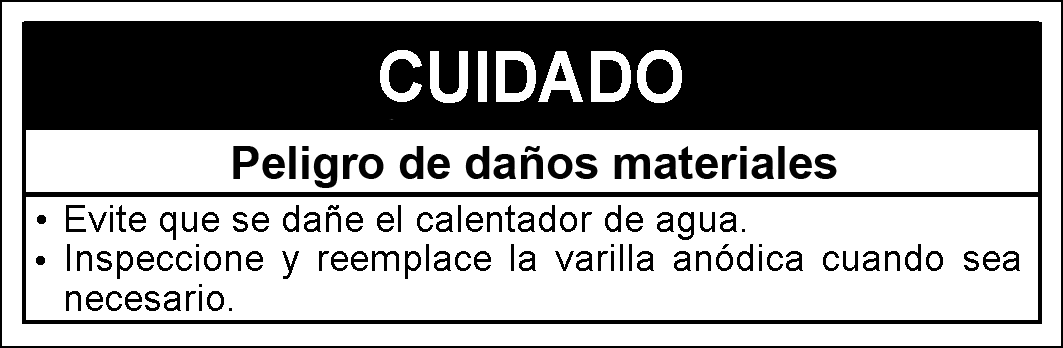
<style>
.page{position:relative;width:1063px;height:348px;background:#ffffff}
.page>*{position:absolute;margin:0}
.t1{font:70.8px "Arial-BoldMT";color:#ffffff;scale:0.93 1}
.t2{font:45.8px "Arial-BoldMT";color:#010101}
.t3{font:37.5px/39.6px "ArialMT";color:#010101}
.t4{font:37.5px "ArialMT";color:#010101}
</style>
<div class="page">
<p class="t1" style="left:380px;top:50px;width:302px;height:53px">CUIDADO</p>
<p class="t2" style="left:233px;top:146px;width:604px;height:42px">Peligro de daños materiales</p>
<p class="t3" style="left:66px;top:205px;width:954px;height:106px;text-align:justify">Evite que se dañe el calentador de agua.<br>Inspeccione y reemplace la varilla anódica cuando sea necesario.</p>
<p class="t4" style="left:37px;top:215px;width:9px;height:9px">•</p>
<p class="t4" style="left:36px;top:256px;width:9px;height:9px">•</p>
</div>
